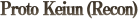
<style>
.page{position:relative;width:139px;height:19px;background:#ffffff}
.page>*{position:absolute;margin:0}
.t1{font:18px "RyuminPro-ExBold";letter-spacing:-0.09em;color:#4a3f32;font-weight:bold;scale:0.9 1}
</style>
<div class="page">
<p class="t1" style="left:0px;top:1px;width:138px;height:18px">Proto Keiun (Recon)</p>
</div>
